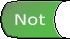
<style>
.page{position:relative;width:70px;height:39px;background:#ffffff}
.page>*{position:absolute;margin:0}
.t1{font:14.6px "Verdana";color:#ffffff;scale:1.23 1}
</style>
<div class="page">
<p class="t1" style="left:15px;top:14px;width:30px;height:11px">Not</p>
</div>
